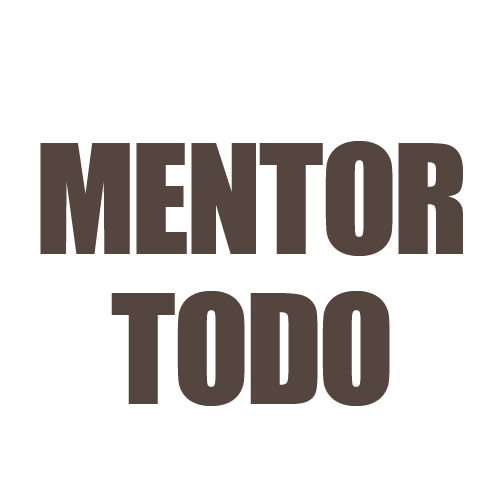
<style>
.page{position:relative;width:500px;height:500px;background:#ffffff}
.page>*{position:absolute;margin:0}
.t1{font:140px/150px "Impact";color:#55453f}
</style>
<div class="page">
<p class="t1" style="left:40px;top:141px;width:423px;height:265px;text-align:center">MENTOR<br>TODO</p>
</div>
